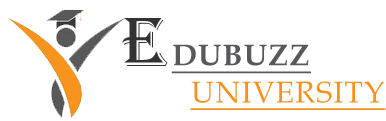
<style>
.page{position:relative;width:386px;height:121px;background:#ffffff}
.page>*{position:absolute;margin:0}
.t1{font:72px "Algerian";letter-spacing:0.04em;color:#333333}
.t2{font:30px "BookAntiqua-Bold";letter-spacing:0.04em;color:#58585b;text-decoration:underline}
.t3{font:30px "BookAntiqua";letter-spacing:0.04em;color:#f5911c;text-decoration:underline}
</style>
<div class="page">
<p class="t1" style="left:122px;top:18px;width:46px;height:48px">e</p>
<p class="t2" style="left:171px;top:44px;width:140px;height:30px">DUBUZZ</p>
<p class="t3" style="left:190px;top:81px;width:196px;height:29px">UNIVERSITY</p>
</div>
